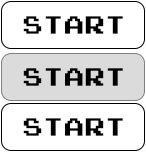
<style>
.page{position:relative;width:146px;height:153px;background:#ffffff}
.page>*{position:absolute;margin:0}
.t1{font:25px "JoystixMonospace-Regular";color:#000000}
</style>
<div class="page">
<p class="t1" style="left:23px;top:16px;width:100px;height:18px">STart</p>
<p class="t1" style="left:23px;top:68px;width:100px;height:18px">STart</p>
<p class="t1" style="left:23px;top:118px;width:100px;height:18px">STart</p>
</div>
